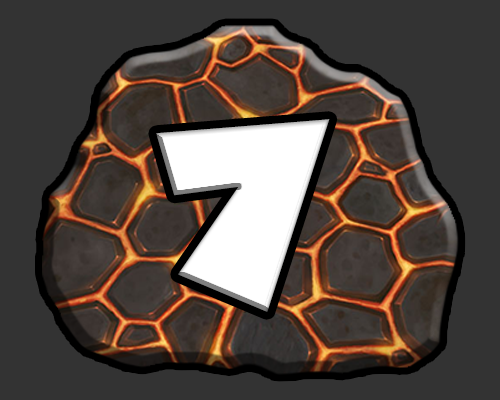
<style>
.page{position:relative;width:500px;height:400px;background:#333333}
.page>*{position:absolute;margin:0}
.t1{font:274.5px "Funhouse";color:#ffffff}
</style>
<div class="page">
<p class="t1" style="left:156px;top:119px;width:174px;height:193px">7</p>
</div>
